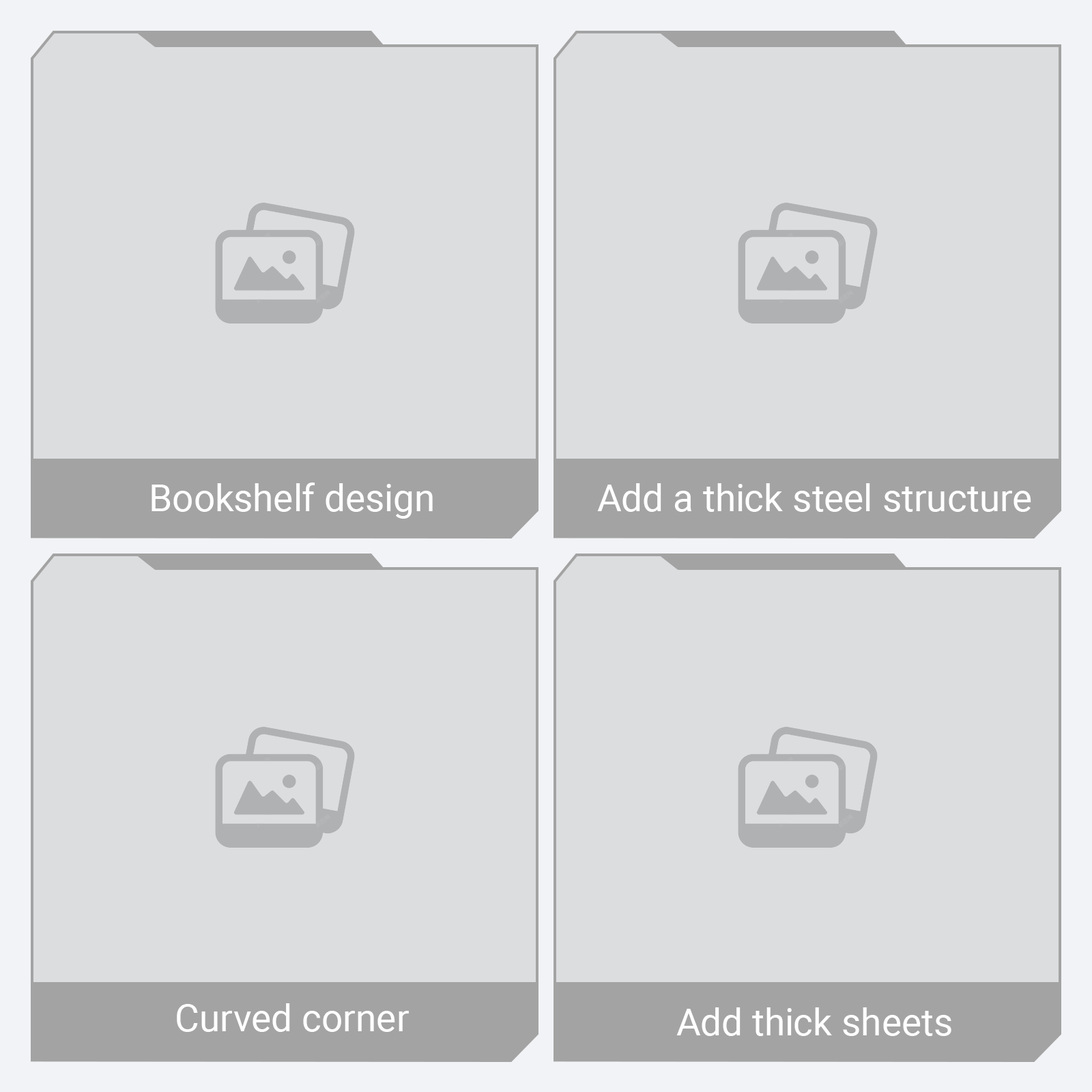
<style>
.page{position:relative;width:1092px;height:1092px;background:#dcdddf}
.page>*{position:absolute;margin:0}
.t1{font:37.9px "Roboto-Regular";color:#ffffff}
</style>
<div class="page">
<p class="t1" style="left:152px;top:483px;width:281px;height:36px">Bookshelf design</p>
<p class="t1" style="left:597px;top:483px;width:434px;height:29px">Add a thick steel structure</p>
<p class="t1" style="left:177px;top:1003px;width:232px;height:29px">Curved corner</p>
<p class="t1" style="left:676px;top:1007px;width:275px;height:29px">Add thick sheets</p>
</div>
